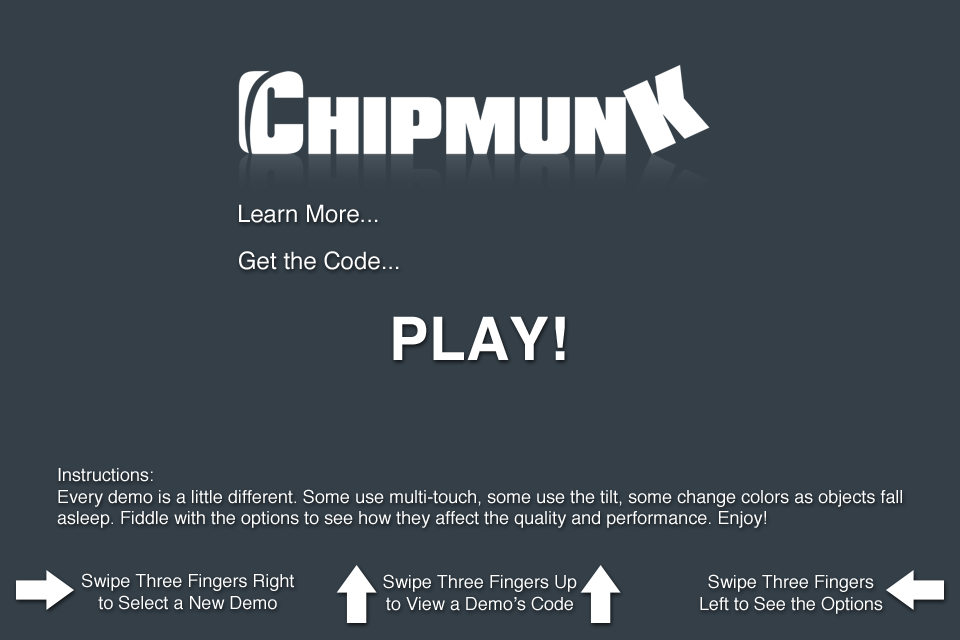
<style>
.page{position:relative;width:960px;height:640px;background:#343f48}
.page>*{position:absolute;margin:0}
.t1{font:24px "Helvetica";color:#ffffff}
.t2{font:60px "Helvetica-Bold";color:#ffffff}
.t3{font:18px "Helvetica";color:#ffffff}
</style>
<div class="page">
<p class="t1" style="left:239px;top:204px;width:139px;height:19px">Learn More...</p>
<p class="t1" style="left:239px;top:251px;width:160px;height:19px">Get the Code...</p>
<p class="t2" style="left:393px;top:316px;width:172px;height:44px">PLAY!</p>
<p class="t3" style="left:57px;top:468px;width:845px;height:60px">Instructions:<br>Every demo is a little different. Some use multi-touch, some use the tilt, some change colors as objects fall<br>asleep. Fiddle with the options to see how they affect the quality and performance. Enjoy!</p>
<p class="t3" style="left:82px;top:573px;width:212px;height:37px;text-align:center">Swipe Three Fingers Right<br>to Select a New Demo</p>
<p class="t3" style="left:383px;top:574px;width:194px;height:37px;text-align:center">Swipe Three Fingers Up<br>to View a Demo’s Code</p>
<p class="t3" style="left:700px;top:574px;width:183px;height:40px;text-align:center">Swipe Three Fingers<br>Left to See the Options</p>
</div>
